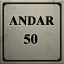
<style>
.page{position:relative;width:64px;height:64px}
.page>*{position:absolute;margin:0}
.t1{font:12.7px "TimesNewRomanPS-BoldMT";letter-spacing:0.005em;color:#040404;text-transform:uppercase;font-weight:bold;scale:0.95 1}
.t2{font:14.3px "TimesNewRomanPS-BoldMT";letter-spacing:0.005em;color:#040404;text-transform:uppercase;font-weight:bold;scale:0.97 1}
</style>
<div class="page">
<p class="t1" style="left:9px;top:16px;width:46px;height:10px">andar</p>
<p class="t2" style="left:23px;top:34px;width:15px;height:10px">50</p>
</div>
